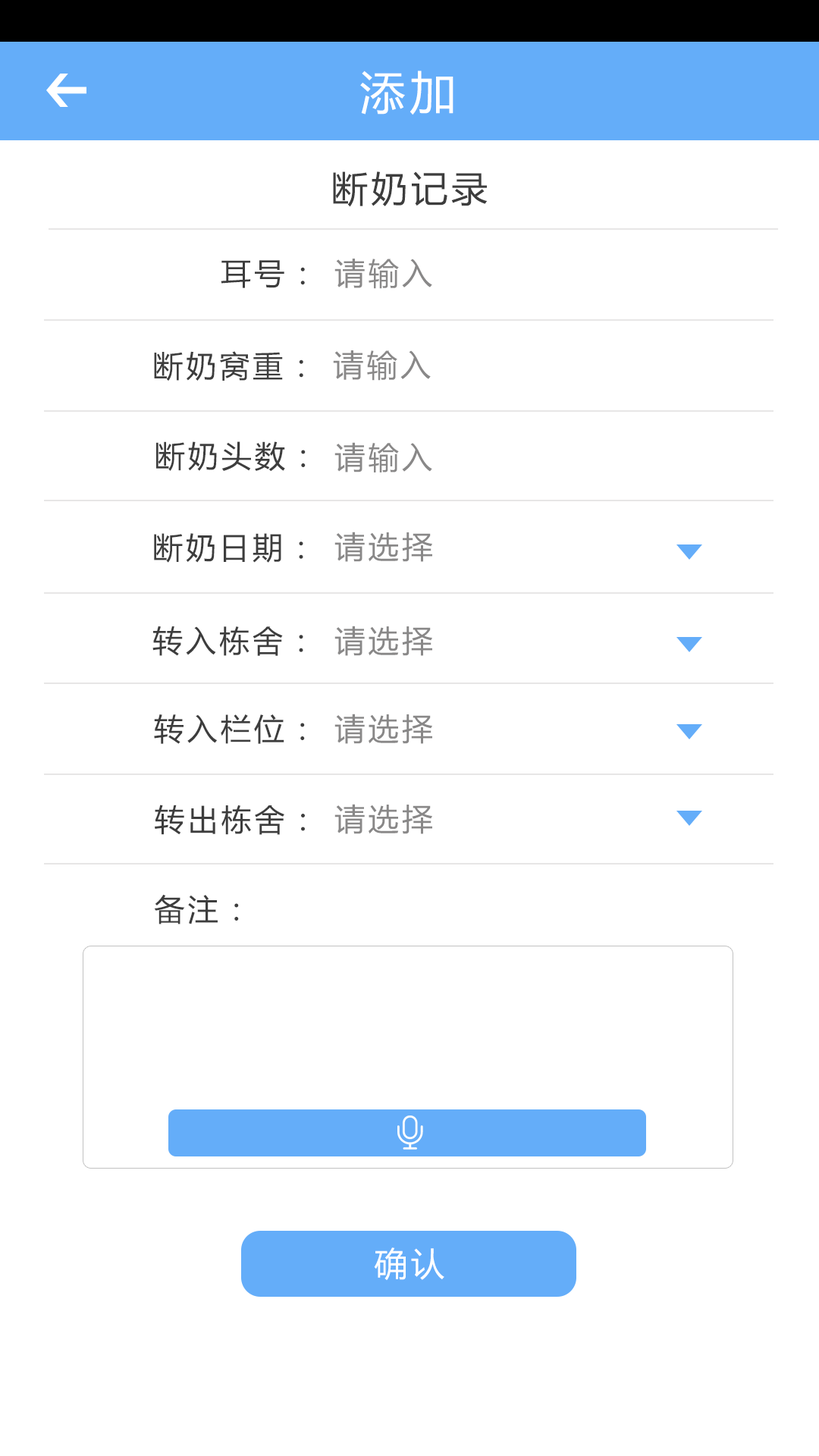
<style>
.page{position:relative;width:819px;height:1456px;background:#ffffff}
.page>*{position:absolute;margin:0}
.t1{font:45.5px "MicrosoftYaHei";letter-spacing:0.1em;color:#ffffff}
.t2{font:36.4px "MicrosoftYaHei";letter-spacing:0.1em;color:#3d3d3d}
.t3{font:30.3px "MicrosoftYaHei";letter-spacing:0.1em;color:#3d3d3d}
.t4{font:30.7px "MicrosoftYaHei";letter-spacing:0.1em;color:#898888}
.t5{font:33.4px "MicrosoftYaHei";letter-spacing:0.1em;color:#ffffff}
</style>
<div class="page">
<p class="t1" style="left:360px;top:71px;width:93px;height:44px">添加</p>
<p class="t2" style="left:333px;top:171px;width:155px;height:36px">断奶记录</p>
<p class="t3" style="left:221px;top:260px;width:84px;height:28px">耳号：</p>
<p class="t4" style="left:334px;top:259px;width:98px;height:30px">请输入</p>
<p class="t3" style="left:154px;top:351px;width:149px;height:30px">断奶窝重：</p>
<p class="t4" style="left:333px;top:350px;width:98px;height:31px">请输入</p>
<p class="t3" style="left:156px;top:441px;width:150px;height:31px">断奶头数：</p>
<p class="t4" style="left:334px;top:442px;width:98px;height:30px">请输入</p>
<p class="t3" style="left:154px;top:533px;width:149px;height:30px">断奶日期：</p>
<p class="t4" style="left:334px;top:532px;width:98px;height:30px">请选择</p>
<p class="t3" style="left:152px;top:626px;width:151px;height:30px">转入栋舍：</p>
<p class="t4" style="left:334px;top:626px;width:98px;height:30px">请选择</p>
<p class="t4" style="left:334px;top:714px;width:98px;height:30px">请选择</p>
<p class="t3" style="left:154px;top:714px;width:151px;height:30px">转入栏位：</p>
<p class="t3" style="left:155px;top:805px;width:150px;height:30px">转出栋舍：</p>
<p class="t4" style="left:334px;top:804px;width:98px;height:30px">请选择</p>
<p class="t3" style="left:154px;top:894px;width:85px;height:30px">备注：</p>
<p class="t5" style="left:374px;top:1247px;width:70px;height:33px">确认</p>
</div>
